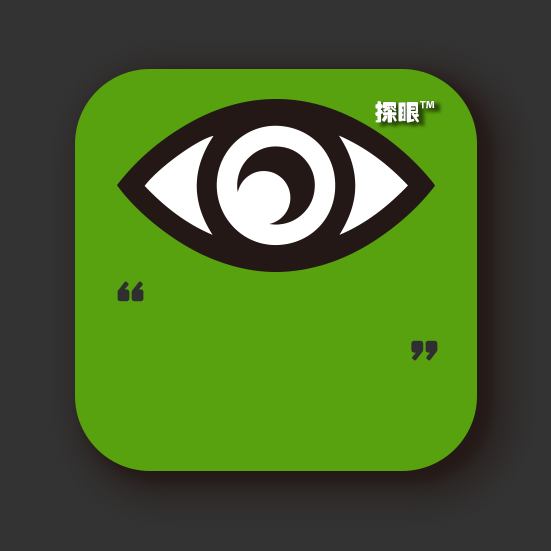
<style>
.page{position:relative;width:551px;height:551px;background:#57a20e}
.page>*{position:absolute;margin:0}
.t1{font:22.4px "Tensentype-JinZhuanHeiJ";color:#ffffff}
.t2{font:22.4px "AdobeHeitiStd-Regular";color:#ffffff}
.t3{font:74.9px "Tensentype-JinZhuanHeiJ";color:#2f2f2f}
</style>
<div class="page">
<p class="t1" style="left:375px;top:101px;width:60px;height:22px">探眼<span class="t2">™</span></p>
<p class="t3" style="left:117px;top:281px;width:27px;height:21px">“</p>
<p class="t3" style="left:411px;top:340px;width:27px;height:21px">”</p>
</div>
